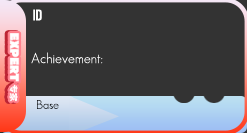
<style>
.page{position:relative;width:247px;height:133px;background:#333333}
.page>*{position:absolute;margin:0}
.t1{font:14px "AgencyFB-Bold";color:#ffffff}
.t2{font:14px "Andrea-Light";color:#ffffff}
.t3{font:12px "Andrea-Light";color:#1c1e21}
</style>
<div class="page">
<p class="t1" style="left:33px;top:9px;width:9px;height:12px">ID</p>
<p class="t2" style="left:31px;top:52px;width:72px;height:12px">Achievement:</p>
<p class="t3" style="left:37px;top:100px;width:22px;height:9px">Base</p>
</div>
